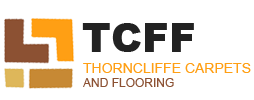
<style>
.page{position:relative;width:254px;height:100px;background:#ffffff}
.page>*{position:absolute;margin:0}
.t1{font:40px "Arial-Black";color:#222222}
.t2{font:14px "ArialMT";color:#ff9f14}
.t3{font:12px "ArialMT";color:#8c5133}
</style>
<div class="page">
<p class="t1" style="left:82px;top:23px;width:112px;height:29px">TCFF</p>
<p class="t2" style="left:83px;top:63px;width:168px;height:24px">THORNCLIFFE CARPETS<br><span class="t3">AND FLOORING</span></p>
</div>
